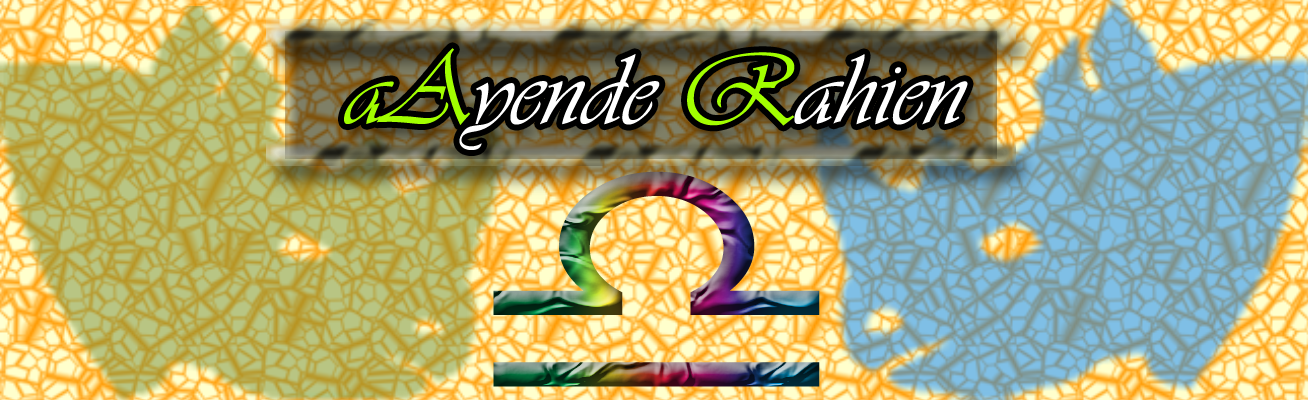
<style>
.page{position:relative;width:1308px;height:400px}
.page>*{position:absolute;margin:0}
.t1{font:104.3px "Vivaldii";color:#ffffff}
.t2{font:78.3px "Vivaldii";color:#ffffff}
.t3{font:104.3px "Vivaldii";color:#a2ff00}
</style>
<div class="page">
<p class="t1" style="left:344px;top:48px;width:624px;height:102px"><span class="t2"><br></span><span class="t3">aA</span>yende <span class="t3">R</span>ahien</p>
</div>
